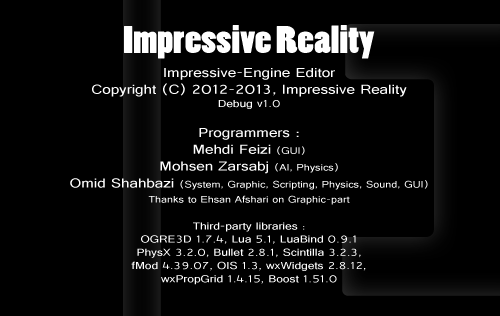
<style>
.page{position:relative;width:500px;height:316px;background:#000000}
.page>*{position:absolute;margin:0}
.t1{font:36px "PoplarStd";color:#ffffff;scale:1.2 1}
.t2{font:11px "Raavi";color:#ffffff;scale:1.2 1}
.t3{font:14px "Raavi";color:#ffffff;scale:1.2 1}
.t4{font:10px "Raavi";color:#ffffff;scale:1.2 1}
</style>
<div class="page">
<p class="t1" style="left:124px;top:25px;width:251px;height:34px">Impressive Reality</p>
<p class="t2" style="left:70px;top:68px;width:358px;height:217px;text-align:center"><span class="t3">Impressive-Engine Editor<br>Copyright (C) 2012-2013, Impressive Reality<br></span>Debug v1.0<br><br><span class="t3">Programmers :<br>Mehdi Feizi </span><span class="t4">(GUI)<br></span><span class="t3">Mohsen Zarsabj </span><span class="t4">(AI, Physics)<br></span><span class="t3">Omid Shahbazi </span><span class="t4">(System, Graphic, Scripting, Physics, Sound, GUI)<br>Thanks to Ehsan Afshari on Graphic-part<br><br></span>Third-party libraries :<br>OGRE3D 1.7.4, Lua 5.1, LuaBind 0.9.1<br>PhysX 3.2.0, Bullet 2.8.1, Scintilla 3.2.3,<br>fMod 4.39.07, OIS 1.3, wxWidgets 2.8.12,<br>wxPropGrid 1.4.15, Boost 1.51.0</p>
</div>
